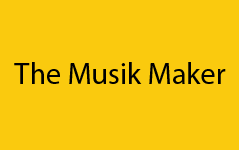
<style>
.page{position:relative;width:239px;height:150px;background:#faca0e}
.page>*{position:absolute;margin:0}
.t1{font:30.2px "MyriadPro-Regular";color:#000000}
</style>
<div class="page">
<p class="t1" style="left:14px;top:62px;width:212px;height:22px">The Musik Maker</p>
</div>
